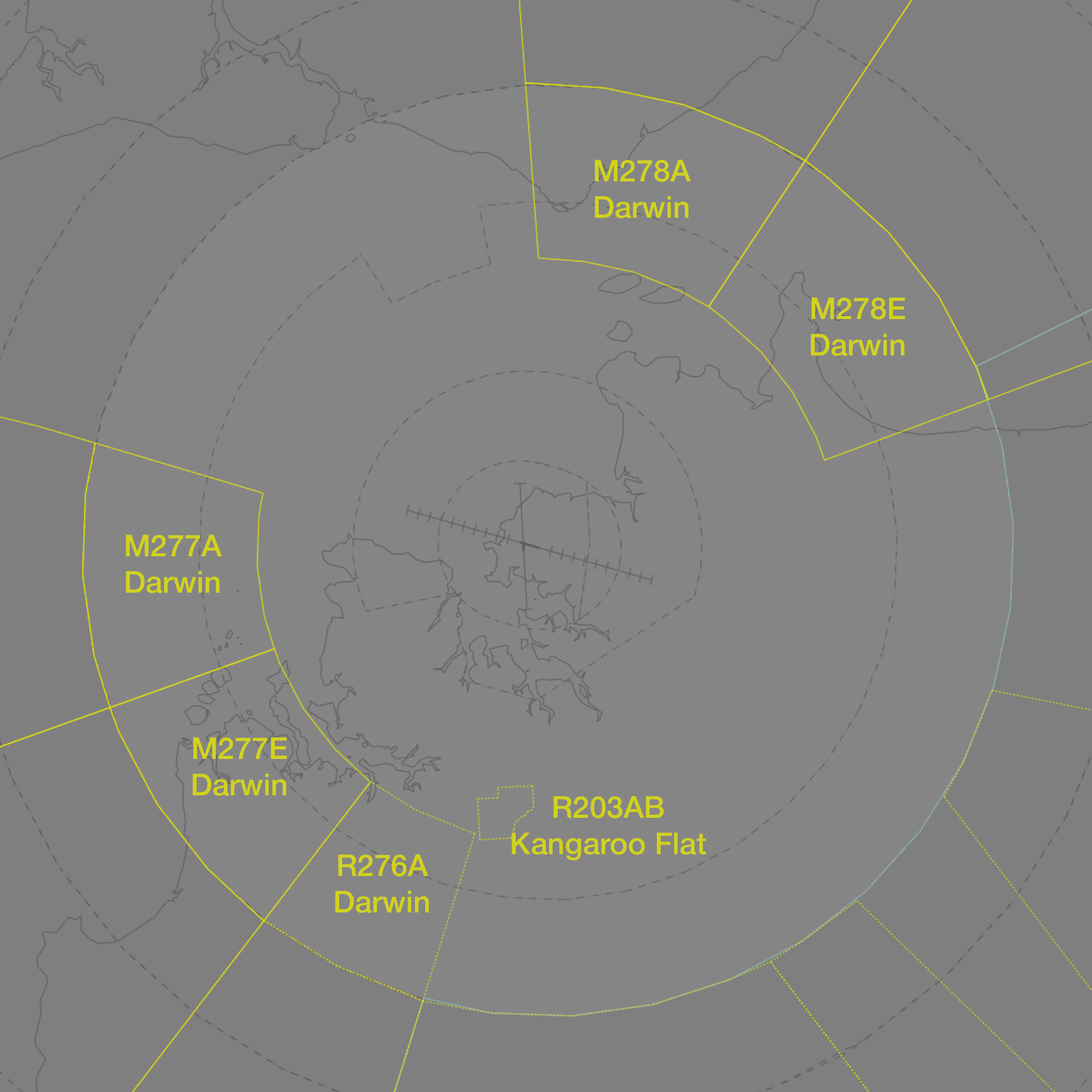
<style>
.page{position:relative;width:1092px;height:1092px;background:#858585}
.page>*{position:absolute;margin:0}
.t1{font:30.3px "HelveticaNeue-Medium";color:#d2d21e}
</style>
<div class="page">
<p class="t1" style="left:595px;top:160px;width:96px;height:58px;text-align:center">M278A<br>Darwin</p>
<p class="t1" style="left:810px;top:297px;width:95px;height:59px;text-align:center">M278E<br>Darwin</p>
<p class="t1" style="left:126px;top:534px;width:96px;height:59px;text-align:center">M277A<br>Darwin</p>
<p class="t1" style="left:192px;top:737px;width:95px;height:59px;text-align:center">M277E<br>Darwin</p>
<p class="t1" style="left:511px;top:796px;width:195px;height:64px;text-align:center">R203AB<br>Kangaroo Flat</p>
<p class="t1" style="left:335px;top:854px;width:94px;height:59px;text-align:center">R276A<br>Darwin</p>
</div>
